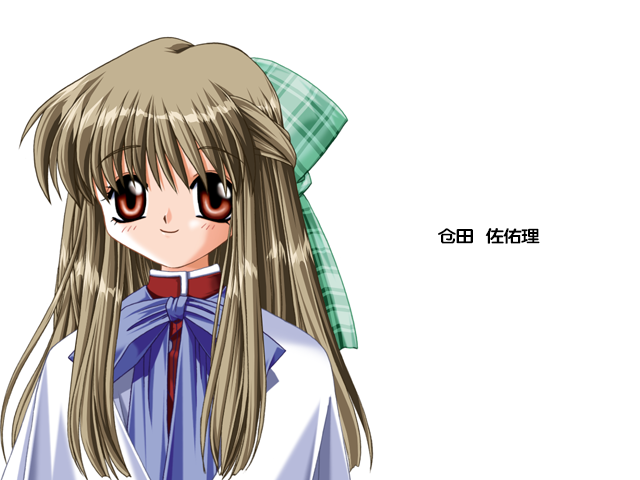
<style>
.page{position:relative;width:640px;height:480px;background:#ffffff}
.page>*{position:absolute;margin:0}
.t1{font:17px "FZY4K--GBK1-0";letter-spacing:-0.08em;color:#000000;scale:1.14 1}
</style>
<div class="page">
<p class="t1" style="left:438px;top:228px;width:102px;height:16px">仓田   佐佑理</p>
</div>
